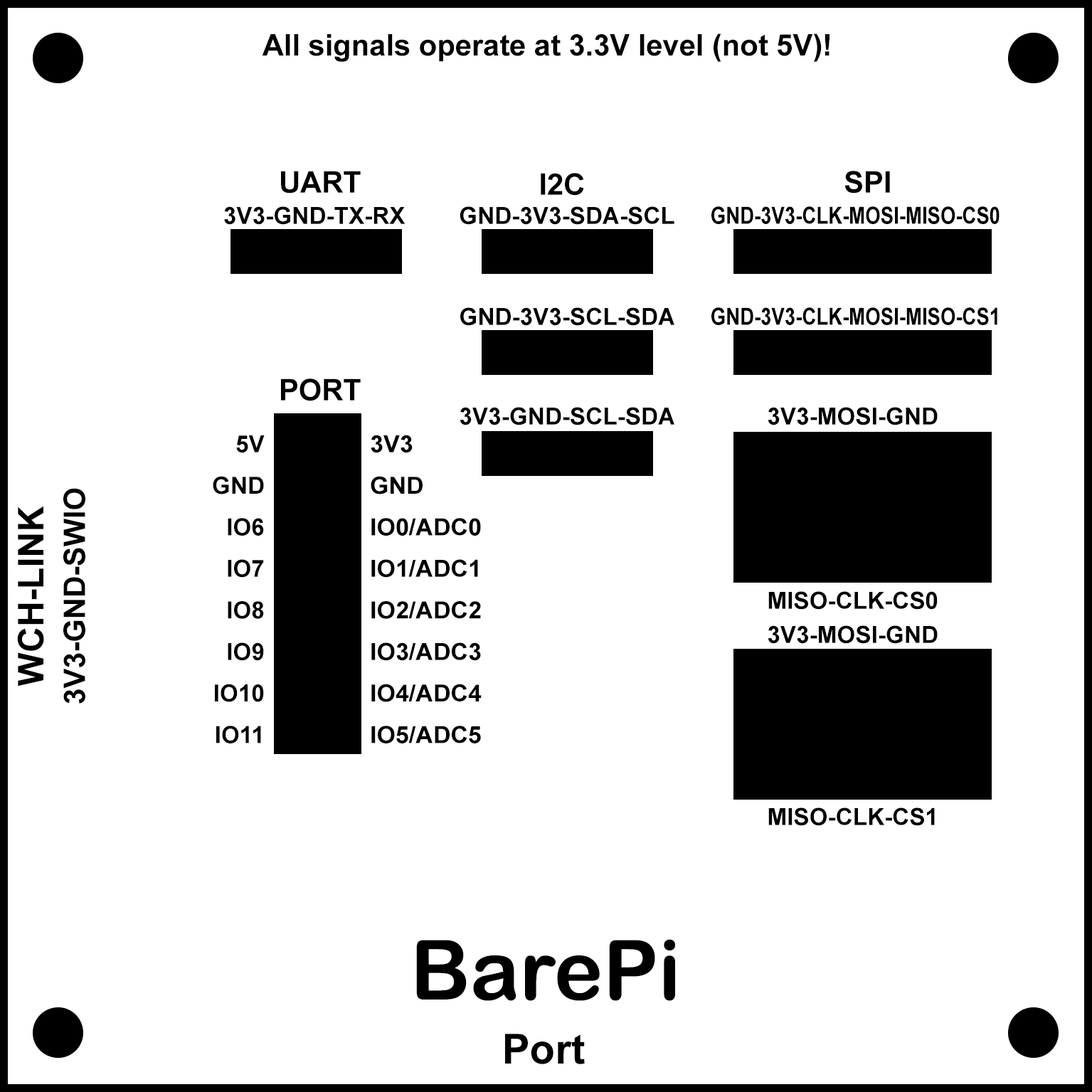
<style>
.page{position:relative;width:1092px;height:1092px;background:#ffffff}
.page>*{position:absolute;margin:0}
.t1{font:29.6px "Arial-BoldMT";color:#000000}
.t2{font:23.7px "Arial-BoldMT";color:#000000}
.t3{font:23.6px "Arial-BoldMT";color:#000000;scale:0.83 1}
.t4{font:23.7px/41.5px "Arial-BoldMT";color:#000000}
.t5{font:29.6px/41.5px "Arial-BoldMT";color:#000000}
.t6{font:35.6px/41.5px "Arial-BoldMT";color:#000000}
.t7{font:83px "ArialRoundedMTBold";color:#000000}
.t8{font:41.5px "Arial-BoldMT";color:#000000}
</style>
<div class="page">
<p class="t1" style="left:262px;top:33px;width:567px;height:29px">All signals operate at 3.3V level (not 5V)!</p>
<p class="t1" style="left:281px;top:171px;width:80px;height:22px">UART</p>
<p class="t1" style="left:541px;top:173px;width:43px;height:23px">I2C</p>
<p class="t1" style="left:844px;top:171px;width:46px;height:22px">SPI</p>
<p class="t2" style="left:224px;top:206px;width:181px;height:19px">3V3-GND-TX-RX</p>
<p class="t2" style="left:460px;top:206px;width:214px;height:19px">GND-3V3-SDA-SCL</p>
<p class="t3" style="left:711px;top:206px;width:289px;height:18px">GND-3V3-CLK-MOSI-MISO-CS0</p>
<p class="t2" style="left:460px;top:307px;width:214px;height:19px">GND-3V3-SCL-SDA</p>
<p class="t3" style="left:711px;top:307px;width:286px;height:18px">GND-3V3-CLK-MOSI-MISO-CS1</p>
<p class="t1" style="left:281px;top:378px;width:80px;height:23px">PORT</p>
<p class="t2" style="left:460px;top:407px;width:214px;height:18px">3V3-GND-SCL-SDA</p>
<p class="t2" style="left:768px;top:407px;width:170px;height:18px">3V3-MOSI-GND</p>
<p class="t4" style="left:213px;top:435px;width:52px;height:308px;text-align:right">5V<br>GND<br>IO6<br>IO7<br>IO8<br>IO9<br>IO10<br>IO11</p>
<p class="t4" style="left:371px;top:435px;width:111px;height:308px">3V3<br>GND<br>IO0/ADC0<br>IO1/ADC1<br>IO2/ADC2<br>IO3/ADC3<br>IO4/ADC4<br>IO5/ADC5</p>
<p class="t5" style="left:17px;top:488px;width:68px;height:216px;text-align:center;rotate:-90deg"><span class="t6">WCH-LINK<br></span>3V3-GND-SWIO</p>
<p class="t2" style="left:768px;top:591px;width:170px;height:19px">MISO-CLK-CS0</p>
<p class="t2" style="left:768px;top:625px;width:170px;height:19px">3V3-MOSI-GND</p>
<p class="t2" style="left:768px;top:807px;width:167px;height:19px">MISO-CLK-CS1</p>
<p class="t7" style="left:416px;top:939px;width:259px;height:62px">BarePi</p>
<p class="t8" style="left:505px;top:1034px;width:80px;height:30px">Port</p>
</div>
